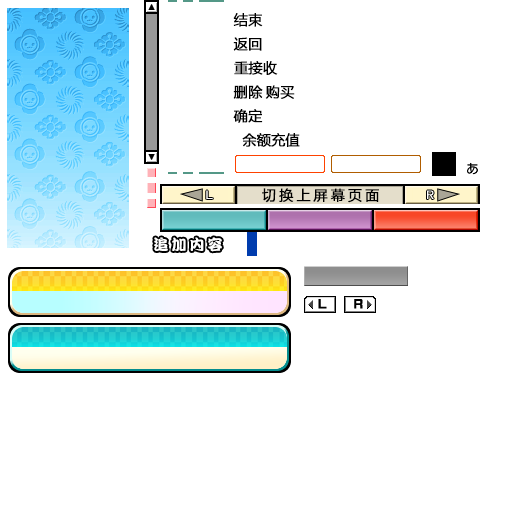
<style>
.page{position:relative;width:512px;height:512px;background:#ffffff}
.page>*{position:absolute;margin:0}
.t1{font:14px "MicrosoftYaHei";color:#000000;font-weight:bold}
.t2{font:14px "MicrosoftYaHei";letter-spacing:0.2em;color:#000000;font-weight:bold}
.t3{font:15px "DFPKanTingLiuW9";letter-spacing:0.2em;color:#ffffff}
</style>
<div class="page">
<p class="t1" style="left:233px;top:13px;width:30px;height:14px">结束</p>
<p class="t1" style="left:233px;top:37px;width:29px;height:14px">返回</p>
<p class="t1" style="left:234px;top:61px;width:44px;height:14px">重接收</p>
<p class="t1" style="left:233px;top:85px;width:30px;height:14px">删除</p>
<p class="t1" style="left:265px;top:85px;width:30px;height:14px">购买</p>
<p class="t1" style="left:233px;top:109px;width:30px;height:14px">确定</p>
<p class="t1" style="left:242px;top:133px;width:58px;height:14px">余额充值</p>
<p class="t2" style="left:262px;top:188px;width:117px;height:15px">切换上屏幕页面</p>
<p class="t3" style="left:154px;top:237px;width:68px;height:15px">追加内容</p>
</div>
